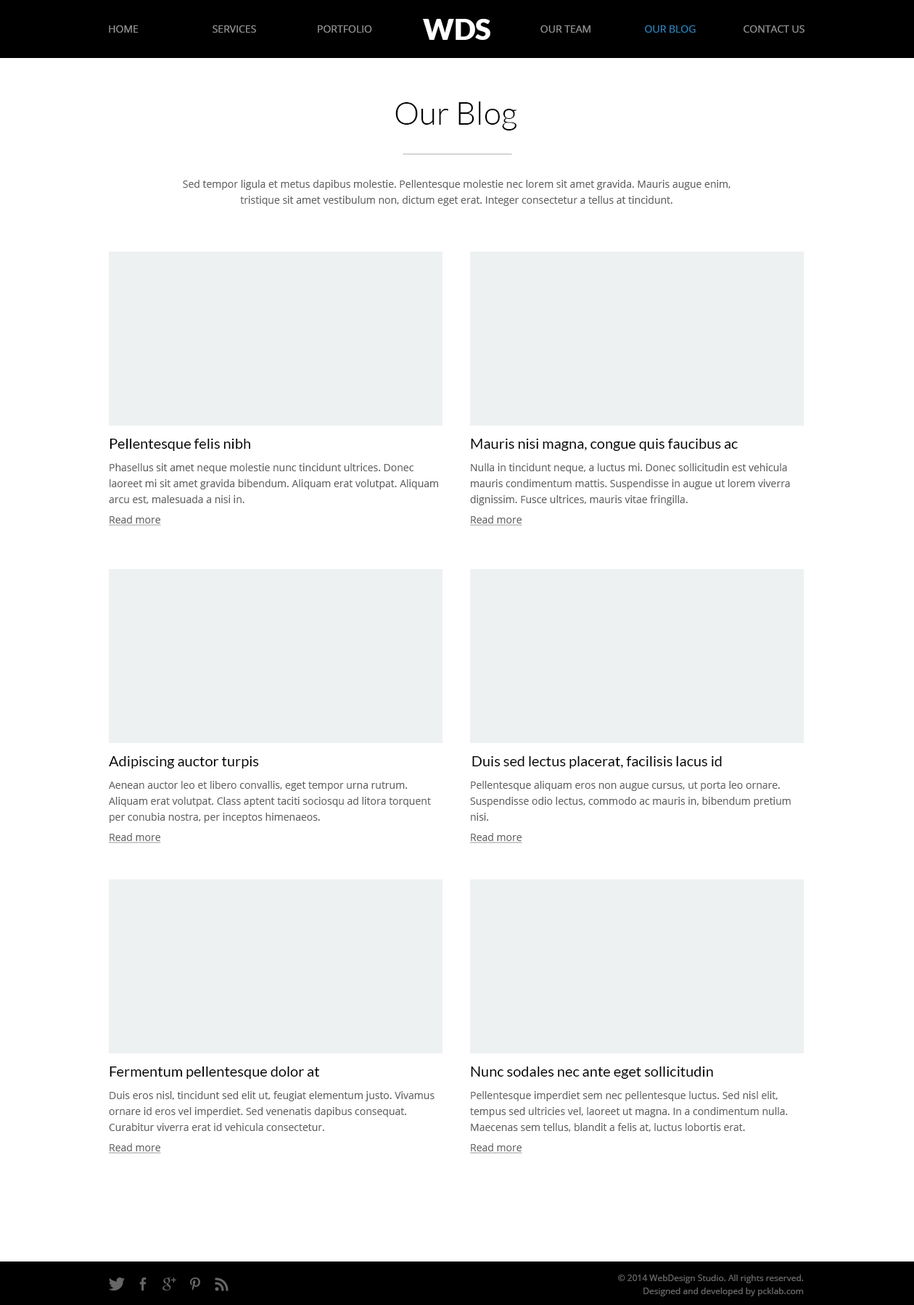
<style>
.page{position:relative;width:914px;height:1305px;background:#ffffff}
.page>*{position:absolute;margin:0}
.t1{font:10.2px "OpenSans";color:#909090;text-transform:uppercase}
.t2{font:29px "Lato-Black";color:#ffffff;text-transform:uppercase}
.t3{font:10.2px "OpenSans";color:#2980b9;text-transform:uppercase}
.t4{font:31.9px "Lato-Light";color:#000000}
.t5{font:10.2px/16px "OpenSans";color:#606060}
.t6{font:14.5px "Lato-Regular";color:#000000}
.t7{font:10.2px/20.3px "OpenSans";color:#606060;text-decoration:underline}
.t8{font:8.7px/13.1px "OpenSans";color:#666666}
</style>
<div class="page">
<p class="t1" style="left:109px;top:25px;width:29px;height:8px">home</p>
<p class="t1" style="left:212px;top:25px;width:44px;height:8px">services</p>
<p class="t1" style="left:318px;top:25px;width:54px;height:8px">Portfolio</p>
<p class="t2" style="left:423px;top:19px;width:67px;height:21px">WDs</p>
<p class="t1" style="left:540px;top:25px;width:50px;height:8px">our team</p>
<p class="t3" style="left:645px;top:25px;width:50px;height:8px">our blog</p>
<p class="t1" style="left:743px;top:25px;width:61px;height:8px">Contact us</p>
<p class="t4" style="left:395px;top:102px;width:122px;height:29px">Our Blog</p>
<p class="t5" style="left:183px;top:180px;width:547px;height:26px;text-align:center">Sed tempor ligula et metus dapibus molestie. Pellentesque molestie nec lorem sit amet gravida. Mauris augue enim, tristique sit amet vestibulum non, dictum eget erat. Integer consectetur a tellus at tincidunt.</p>
<p class="t6" style="left:109px;top:439px;width:141px;height:12px">Pellentesque felis nibh</p>
<p class="t6" style="left:471px;top:439px;width:266px;height:12px">Mauris nisi magna, congue quis faucibus ac</p>
<p class="t5" style="left:109px;top:463px;width:329px;height:63px">Phasellus sit amet neque molestie nunc tincidunt ultrices. Donec laoreet mi sit amet gravida bibendum. Aliquam erat volutpat. Aliquam arcu est, malesuada a nisi in.<br><span class="t7">Read more</span></p>
<p class="t5" style="left:470px;top:463px;width:320px;height:63px">Nulla in tincidunt neque, a luctus mi. Donec sollicitudin est vehicula mauris condimentum mattis. Suspendisse in augue ut lorem viverra dignissim. Fusce ultrices, mauris vitae fringilla.<br><span class="t7">Read more</span></p>
<p class="t6" style="left:109px;top:756px;width:150px;height:13px">Adipiscing auctor turpis</p>
<p class="t6" style="left:472px;top:756px;width:249px;height:13px">Duis sed lectus placerat, facilisis lacus id</p>
<p class="t5" style="left:109px;top:781px;width:322px;height:62px">Aenean auctor leo et libero convallis, eget tempor urna rutrum. Aliquam erat volutpat. Class aptent taciti sociosqu ad litora torquent per conubia nostra, per inceptos himenaeos.<br><span class="t7">Read more</span></p>
<p class="t5" style="left:470px;top:781px;width:320px;height:62px">Pellentesque aliquam eros non augue cursus, ut porta leo ornare. Suspendisse odio lectus, commodo ac mauris in, bibendum pretium nisi.<br><span class="t7">Read more</span></p>
<p class="t6" style="left:109px;top:1067px;width:211px;height:12px">Fermentum pellentesque dolor at</p>
<p class="t6" style="left:471px;top:1067px;width:242px;height:12px">Nunc sodales nec ante eget sollicitudin</p>
<p class="t5" style="left:109px;top:1091px;width:325px;height:63px">Duis eros nisl, tincidunt sed elit ut, feugiat elementum justo. Vivamus ornare id eros vel imperdiet. Sed venenatis dapibus consequat. Curabitur viverra erat id vehicula consectetur.<br><span class="t7">Read more</span></p>
<p class="t5" style="left:470px;top:1091px;width:317px;height:63px">Pellentesque imperdiet sem nec pellentesque luctus. Sed nisl elit, tempus sed ultricies vel, laoreet ut magna. In a condimentum nulla. Maecenas sem tellus, blandit a felis at, luctus lobortis erat.<br><span class="t7">Read more</span></p>
<p class="t8" style="left:618px;top:1275px;width:185px;height:21px;text-align:right">© 2014 WebDesign Studio. All rights reserved.<br>Designed and developed by pcklab.com</p>
</div>
